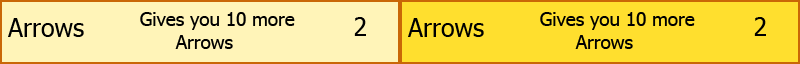
<style>
.page{position:relative;width:800px;height:64px;background:#fff4b8}
.page>*{position:absolute;margin:0}
.t1{font:18.8px "Tahoma";color:#000000}
.t2{font:25px "Tahoma";color:#000000}
</style>
<div class="page">
<p class="t1" style="left:140px;top:12px;width:155px;height:37px">Gives you 10 more <br> Arrows</p>
<p class="t2" style="left:354px;top:17px;width:12px;height:19px">2</p>
<p class="t1" style="left:540px;top:12px;width:155px;height:37px">Gives you 10 more<br> Arrows</p>
<p class="t2" style="left:754px;top:17px;width:12px;height:19px">2</p>
<p class="t2" style="left:8px;top:18px;width:76px;height:19px">Arrows</p>
<p class="t2" style="left:408px;top:18px;width:76px;height:19px">Arrows</p>
</div>
